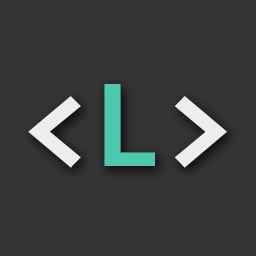
<style>
.page{position:relative;width:256px;height:256px;background:#333333}
.page>*{position:absolute;margin:0}
.t1{font:128px "Consolas-Bold";color:#ededed}
.t2{font:128px "Consolas-Bold";color:#4ec9b0}
</style>
<div class="page">
<p class="t1" style="left:28px;top:84px;width:199px;height:84px">&lt;<span class="t2">L</span>&gt;</p>
</div>
